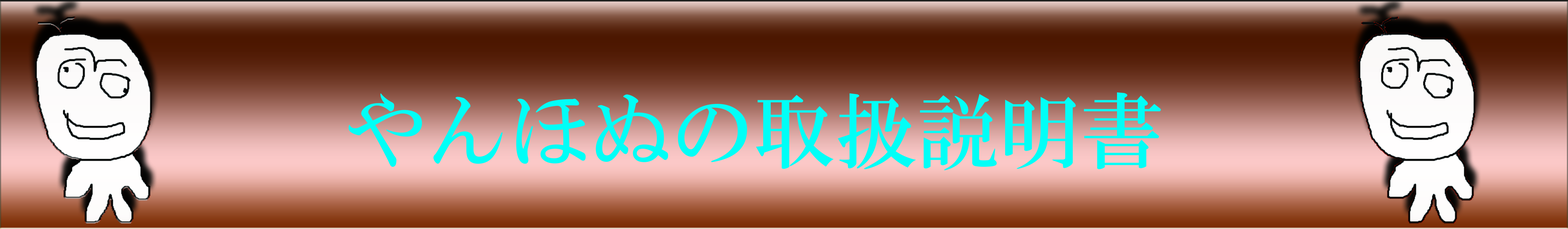
<style>
.page{position:relative;width:1568px;height:229px}
.page>*{position:absolute;margin:0}
.t1{font:81.8px "HGMinchoB";color:#00fff7}
</style>
<div class="page">
<p class="t1" style="left:349px;top:92px;width:812px;height:78px">やんほぬの取扱説明書</p>
</div>
